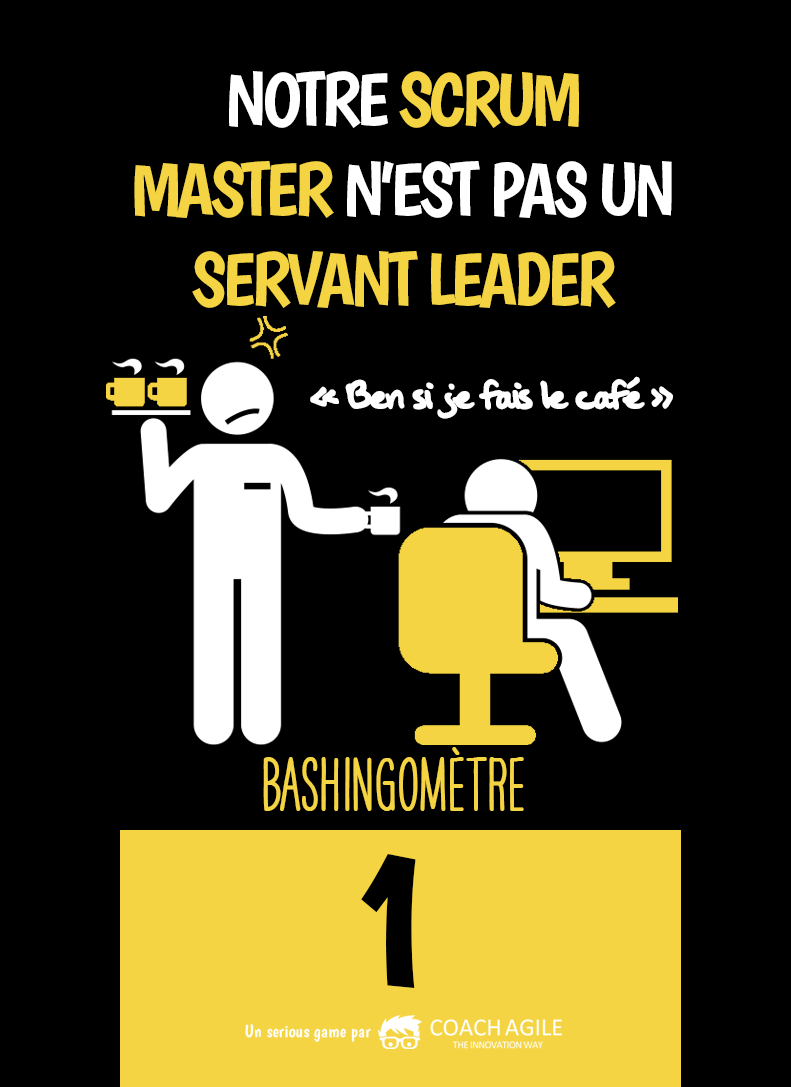
<style>
.page{position:relative;width:791px;height:1087px;background:#000000}
.page>*{position:absolute;margin:0}
.t1{font:75px "Boogaloo-Regular";letter-spacing:-0.06em;color:#f4d443}
.t2{font:75px "Boogaloo-Regular";letter-spacing:-0.06em;color:#ffffff}
.t3{font:45.8px "OakStreetW01-Regular";letter-spacing:-0.08em;color:#ffffff}
.t4{font:66.7px "HAVEANICEDAYTallW04-Bold";color:#f4d443}
.t5{font:200px "Boogaloo-Regular";color:#000000}
</style>
<div class="page">
<p class="t1" style="left:134px;top:71px;width:538px;height:237px;text-align:center"><span class="t2">NOTRE </span>SCRUM MASTER <span class="t2">N’EST PAS UN <br></span>SERVANT LEADER</p>
<p class="t3" style="left:310px;top:376px;width:363px;height:43px">« Ben si je fais le café »</p>
<p class="t4" style="left:263px;top:747px;width:261px;height:64px">BASHINgomètre</p>
<p class="t5" style="left:361px;top:854px;width:55px;height:134px">1</p>
</div>
